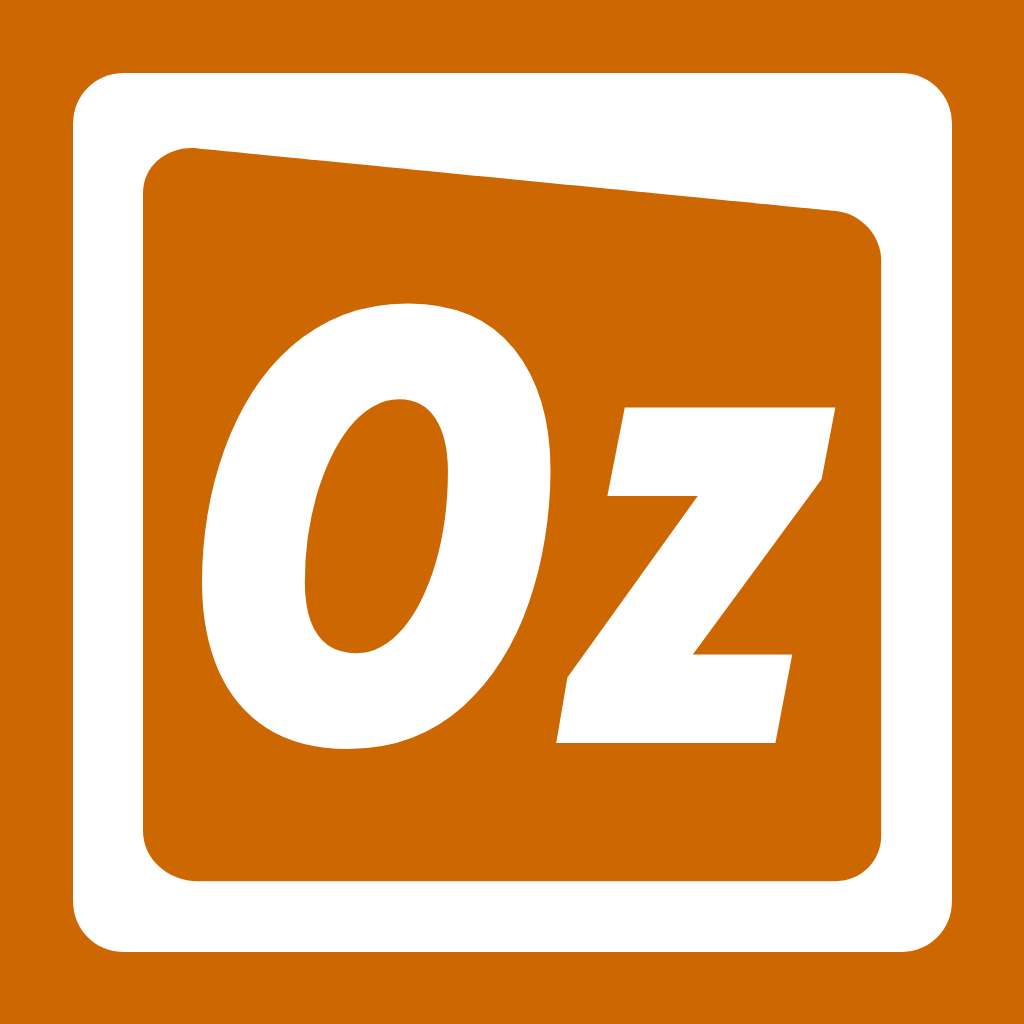
<style>
.page{position:relative;width:1024px;height:1024px;background:#cd6702}
.page>*{position:absolute;margin:0}
.t1{font:606.3px "OpenSans-ExtraBoldItalic";color:#ffffff;scale:0.88 1}
</style>
<div class="page">
<p class="t1" style="left:202px;top:303px;width:634px;height:446px">Oz</p>
</div>
